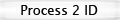
<style>
.page{position:relative;width:120px;height:20px}
.page>*{position:absolute;margin:0}
.t1{font:13px "LucidaGrande";color:#070707}
</style>
<div class="page">
<p class="t1" style="left:21px;top:5px;width:77px;height:10px">Process 2 ID</p>
</div>
